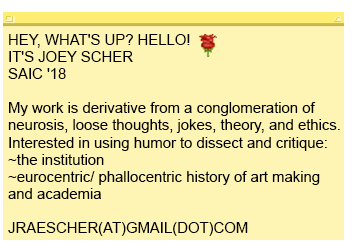
<style>
.page{position:relative;width:354px;height:250px;background:#fef5b4}
.page>*{position:absolute;margin:0}
.t1{font:14.7px/17.1px "ArialMT";color:#000000}
</style>
<div class="page">
<p class="t1" style="left:8px;top:34px;width:332px;height:202px">HEY, WHAT'S UP? HELLO! <br>IT'S JOEY SCHER<br>SAIC '18<br><br>My work is derivative from a conglomeration of<br>neurosis, loose thoughts, jokes, theory, and ethics. <br>Interested in using humor to dissect and critique:<br>~the institution<br>~eurocentric/ phallocentric history of art making<br>and academia <br><br>JRAESCHER(AT)GMAIL(DOT)COM</p>
</div>
